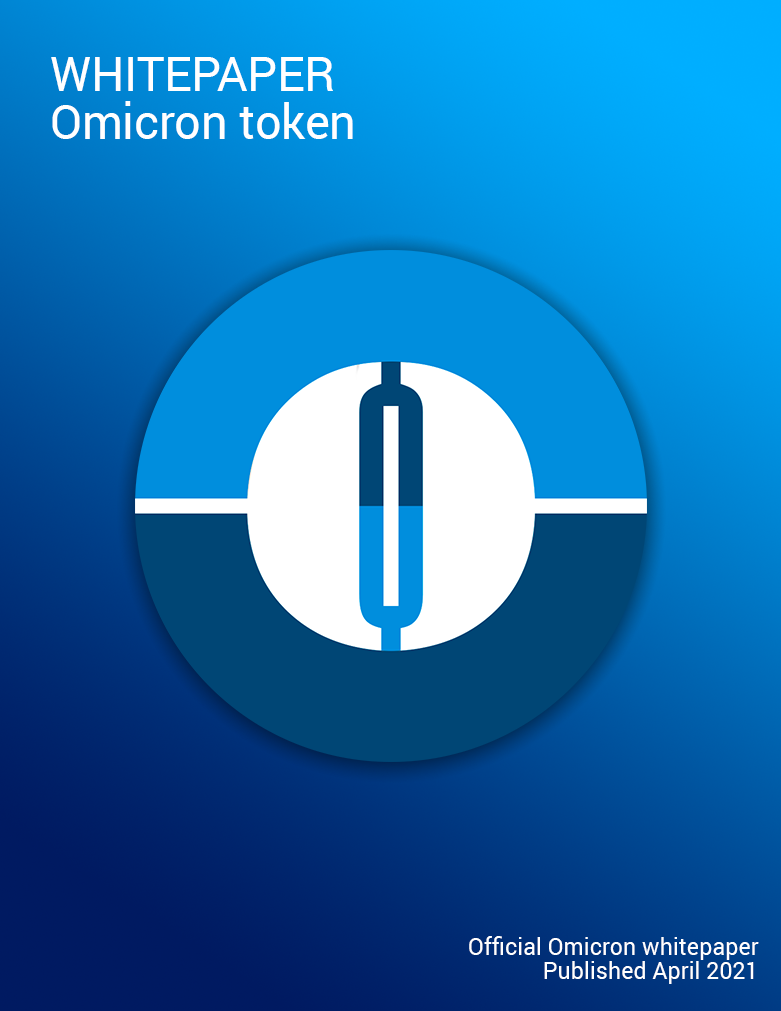
<style>
.page{position:relative;width:781px;height:1011px}
.page>*{position:absolute;margin:0}
.t1{font:48px/48px "Roboto-Regular";color:#ffffff;scale:0.97 1}
.t2{font:48px/48px "Roboto-Regular";color:#ffffff;text-transform:uppercase;scale:0.97 1}
.t3{font:24px/24px "Roboto-Regular";color:#ffffff;scale:0.97 1}
</style>
<div class="page">
<p class="t1" style="left:51px;top:57px;width:302px;height:82px"><span class="t2">Whitepaper<br></span>Omicron token</p>
<p class="t3" style="left:469px;top:936px;width:290px;height:48px;text-align:right">Official Omicron whitepaper<br>Published April 2021</p>
</div>
